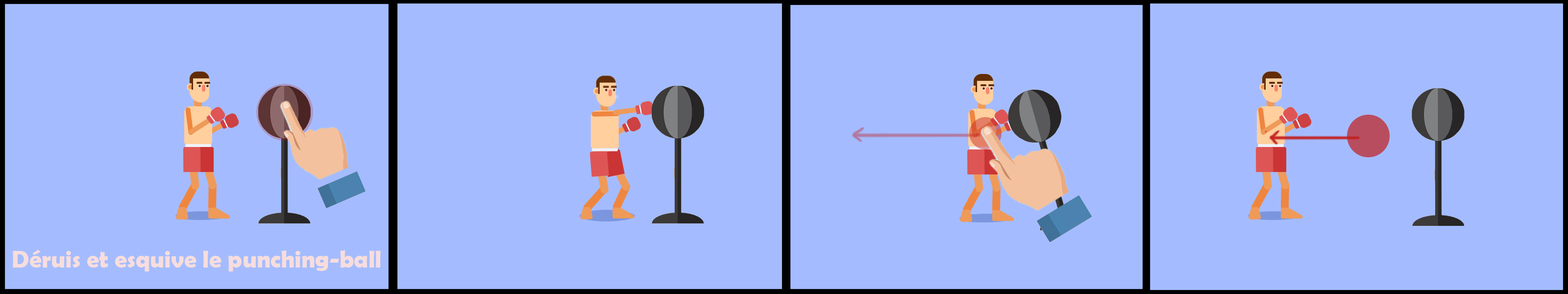
<style>
.page{position:relative;width:1568px;height:294px;background:#a4bcff}
.page>*{position:absolute;margin:0}
.t1{font:24.5px "BerlinSansFBDemi-Bold";color:#f7dddd}
</style>
<div class="page">
<p class="t1" style="left:13px;top:250px;width:368px;height:21px">Déruis et esquive le punching-ball</p>
</div>
